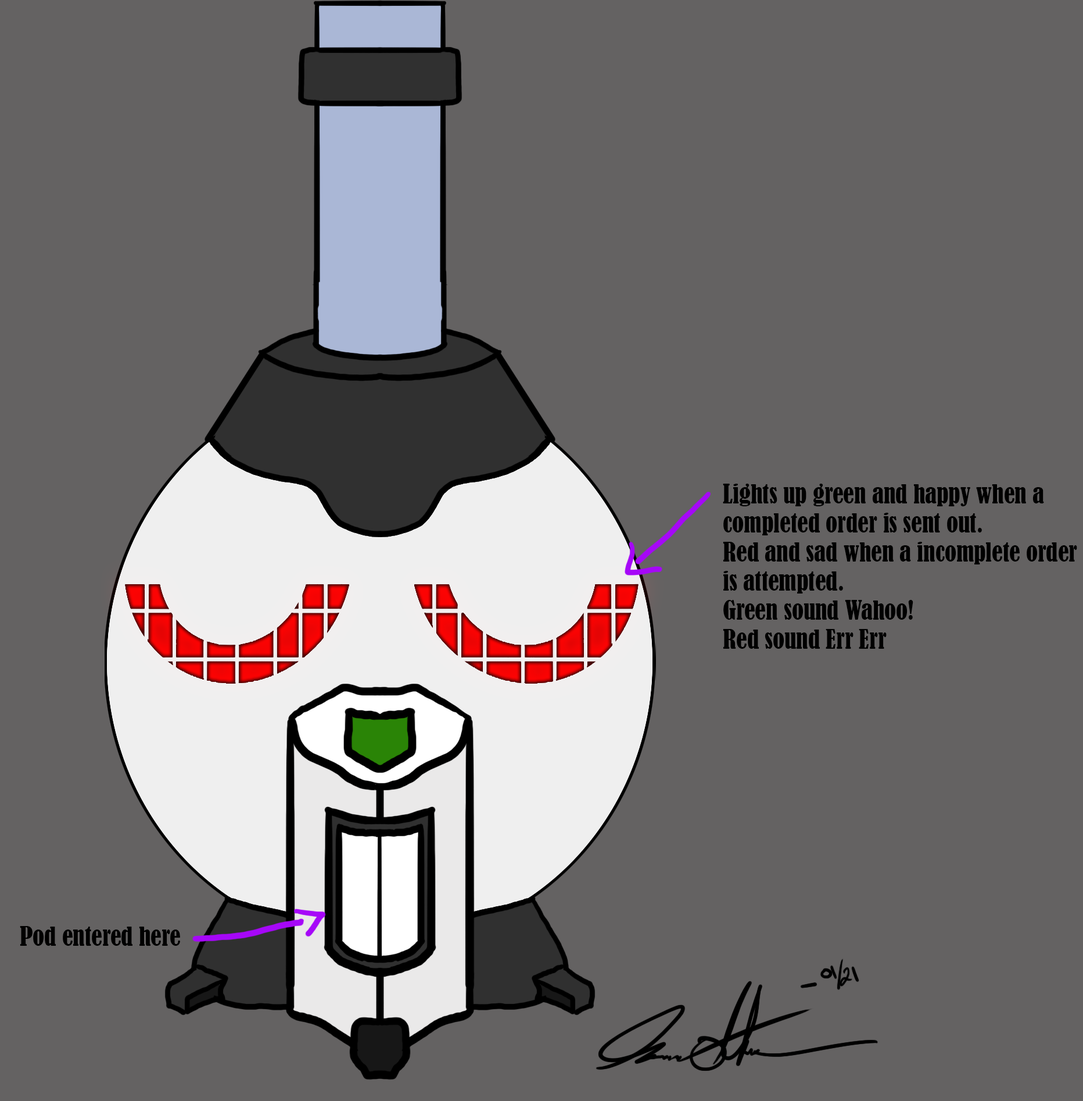
<style>
.page{position:relative;width:1083px;height:1101px;background:#646262}
.page>*{position:absolute;margin:0}
.t1{font:24.2px "BernardMT-Condensed";color:#000000}
</style>
<div class="page">
<p class="t1" style="left:723px;top:484px;width:354px;height:165px">Lights up green and happy when a completed order is sent out.<br>Red and sad when a incomplete order is attempted.<br>Green sound Wahoo!<br>Red sound Err Err</p>
<p class="t1" style="left:20px;top:926px;width:160px;height:20px">Pod entered here</p>
</div>
